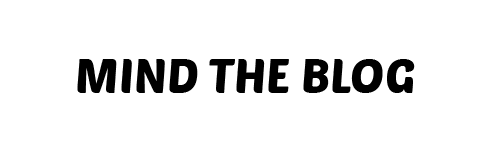
<style>
.page{position:relative;width:480px;height:160px;background:#ffffff}
.page>*{position:absolute;margin:0}
.t1{font:48px "PoetsenOne-Regular";color:#000000}
</style>
<div class="page">
<p class="t1" style="left:77px;top:59px;width:338px;height:34px">MIND THE BLOG</p>
</div>
